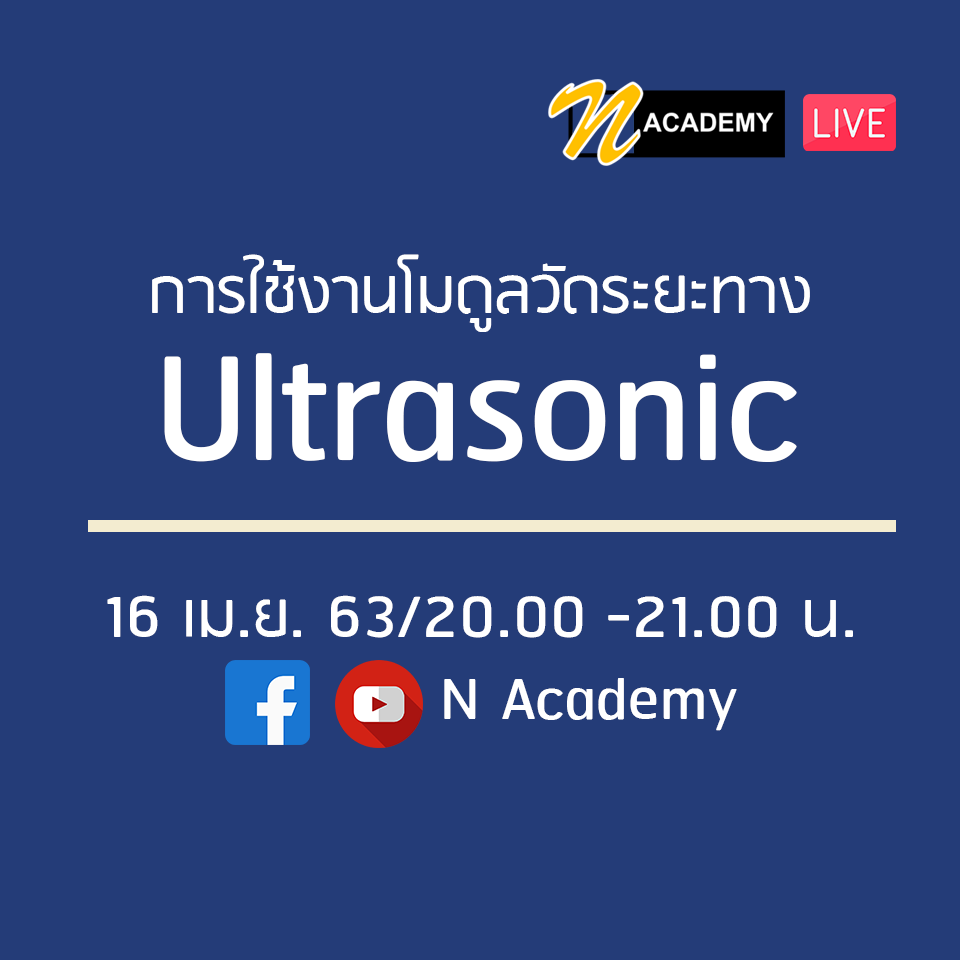
<style>
.page{position:relative;width:960px;height:960px;background:#243c78}
.page>*{position:absolute;margin:0}
.t1{font:72.9px "RSU";color:#ffffff}
.t2{font:187.6px "RSU";color:#ffffff}
</style>
<div class="page">
<p class="t1" style="left:152px;top:254px;width:658px;height:78px">การใช้งานโมดูลวัดระยะทาง</p>
<p class="t2" style="left:164px;top:353px;width:633px;height:109px">Ultrasonic</p>
<p class="t1" style="left:107px;top:595px;width:746px;height:43px">16 เม.ย. 63/20.00 -21.00 น.</p>
<p class="t1" style="left:407px;top:678px;width:330px;height:53px">: N Academy</p>
</div>
